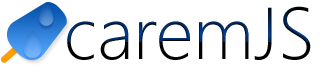
<style>
.page{position:relative;width:320px;height:68px;background:#ffffff}
.page>*{position:absolute;margin:0}
.t1{font:73.2px "SegoeUI-Light"}
</style>
<div class="page">
<p class="t1" style="left:67px;top:6px;width:244px;height:54px">caremJS</p>
</div>
